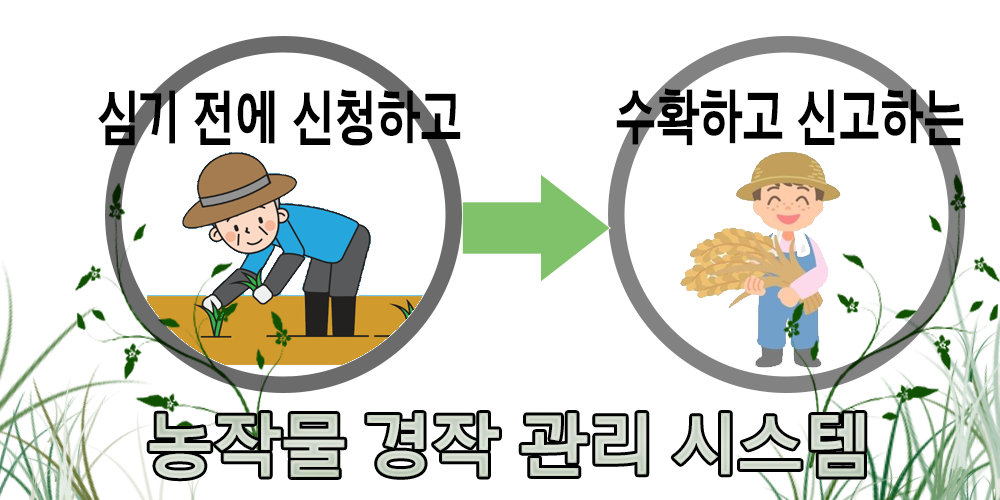
<style>
.page{position:relative;width:1000px;height:500px;background:#ffffff}
.page>*{position:absolute;margin:0}
.t1{font:62.8px "Arita-dotum-Bold_TTF";color:#000000;scale:0.74 1}
.t2{font:63.8px "Arita-dotum-Bold_TTF";color:#000000;scale:0.72 1}
</style>
<div class="page">
<p class="t1" style="left:98px;top:89px;width:363px;height:57px">심기 전에 신청하고</p>
<p class="t2" style="left:616px;top:88px;width:348px;height:58px">수확하고 신고하는</p>
</div>
